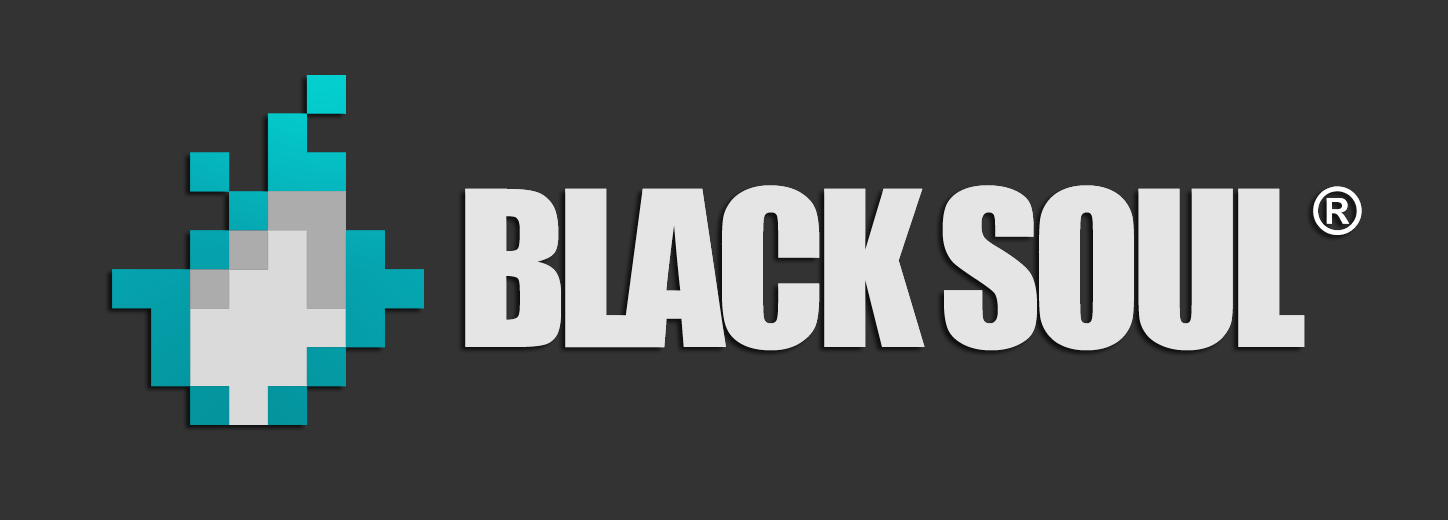
<style>
.page{position:relative;width:1448px;height:520px;background:#333333}
.page>*{position:absolute;margin:0}
.t1{font:200px "Impact";letter-spacing:-0.05em;color:#e5e5e5}
.t2{font:64.6px "Impact";letter-spacing:-0.05em;color:#ffffff}
</style>
<div class="page">
<p class="t1" style="left:465px;top:185px;width:840px;height:166px">BLACK SOUL</p>
<p class="t2" style="left:1313px;top:186px;width:49px;height:49px">®</p>
</div>
